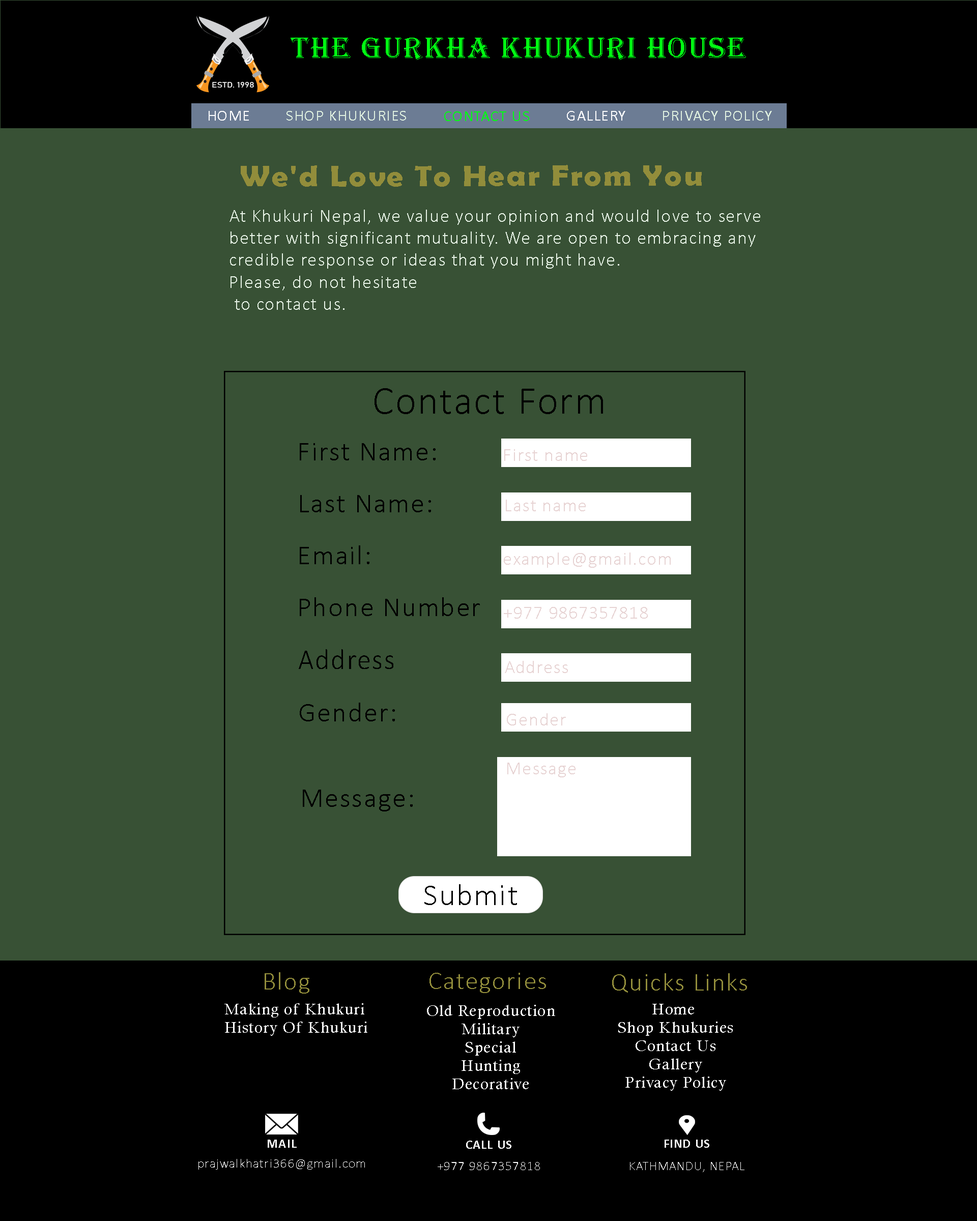
<style>
.page{position:relative;width:977px;height:1221px;background:#385135}
.page>*{position:absolute;margin:0}
.t1{font:30.5px "Algerian";letter-spacing:0.05em;color:#00ff12}
.t2{font:15.3px "Calibri";letter-spacing:0.05em;color:#ffffff}
.t3{font:15.3px "Calibri";letter-spacing:0.05em;color:#deefdf}
.t4{font:15.3px "Calibri";letter-spacing:0.05em;color:#00ff12}
.t5{font:29.3px "BerlinSansFBDemi-Bold";letter-spacing:0.05em;color:#928d3b;scale:1.1 1}
.t6{font:18.3px "Calibri-Light";letter-spacing:0.05em;color:#e7f3e6}
.t7{font:38.9px "Calibri-Light";letter-spacing:0.05em;color:#000000}
.t8{font:27.5px "Calibri-Light";letter-spacing:0.05em;color:#000000}
.t9{font:18.3px "Calibri-Light";letter-spacing:0.05em;color:#e7d3d3}
.t10{font:28.8px "Calibri-Light";letter-spacing:0.05em;color:#000000;scale:0.95 1}
.t11{font:30.5px "Calibri-Light";letter-spacing:0.05em;color:#000000}
.t12{font:25.4px "Calibri-Light";letter-spacing:0.05em;color:#928d3b}
.t13{font:15.3px "CalistoMT";letter-spacing:0.05em;color:#ffffff}
.t14{font:15.3px/60.7px "CalistoMT";letter-spacing:0.05em;color:#ffffff}
.t15{font:12.9px "Calibri-Bold";letter-spacing:0.05em;color:#ffffff}
.t16{font:12.9px "Calibri-Light";letter-spacing:0.05em;color:#ffffff}
</style>
<div class="page">
<p class="t1" style="left:290px;top:38px;width:456px;height:22px">The gurkha khukuri house</p>
<p class="t2" style="left:209px;top:111px;width:40px;height:10px">HOME</p>
<p class="t3" style="left:286px;top:111px;width:120px;height:10px">SHOP KHUKURIES</p>
<p class="t4" style="left:444px;top:111px;width:85px;height:10px">CONTACT US</p>
<p class="t2" style="left:567px;top:111px;width:58px;height:10px">GALLERY</p>
<p class="t3" style="left:663px;top:111px;width:109px;height:10px">PRIVACY POLICY</p>
<p class="t5" style="left:241px;top:165px;width:460px;height:22px">We'd Love To Hear From You</p>
<p class="t6" style="left:229px;top:210px;width:531px;height:100px">At Khukuri Nepal, we value your opinion and would love to serve better with significant mutuality. We are open to embracing any credible response or ideas that you might have.<br>Please, do not hesitate<br> to contact us.</p>
<p class="t7" style="left:374px;top:388px;width:229px;height:26px">Contact Form</p>
<p class="t8" style="left:300px;top:443px;width:135px;height:17px">First Name:</p>
<p class="t9" style="left:504px;top:449px;width:83px;height:12px">First name</p>
<p class="t8" style="left:300px;top:495px;width:131px;height:17px">Last Name:</p>
<p class="t9" style="left:506px;top:500px;width:80px;height:11px">Last name</p>
<p class="t8" style="left:300px;top:545px;width:69px;height:19px">Email:</p>
<p class="t9" style="left:504px;top:552px;width:166px;height:16px">example@gmail.com</p>
<p class="t8" style="left:300px;top:597px;width:180px;height:19px">Phone Number</p>
<p class="t9" style="left:504px;top:607px;width:144px;height:12px">+977 9867357818</p>
<p class="t10" style="left:299px;top:649px;width:94px;height:20px">Address</p>
<p class="t9" style="left:505px;top:661px;width:63px;height:12px">Address</p>
<p class="t8" style="left:300px;top:703px;width:95px;height:18px">Gender:</p>
<p class="t9" style="left:507px;top:713px;width:59px;height:12px">Gender</p>
<p class="t9" style="left:507px;top:763px;width:68px;height:14px">Message</p>
<p class="t8" style="left:303px;top:790px;width:110px;height:21px">Message:</p>
<p class="t11" style="left:424px;top:884px;width:93px;height:21px">Submit</p>
<p class="t12" style="left:265px;top:972px;width:44px;height:21px">Blog</p>
<p class="t12" style="left:429px;top:973px;width:117px;height:20px">Categories</p>
<p class="t12" style="left:612px;top:973px;width:135px;height:19px">Quicks Links</p>
<p class="t13" style="left:224px;top:1003px;width:143px;height:33px"><span class="t14">Making of Khukuri</span><br>History Of Khukuri</p>
<p class="t13" style="left:427px;top:1005px;width:128px;height:84px;text-align:center"><span class="t14">Old Reproduction</span><br>Military<br>Special<br>Hunting<br>Decorative</p>
<p class="t13" style="left:618px;top:1004px;width:115px;height:87px;text-align:center">Home <br>Shop Khukuries<br>Contact Us<br>Gallery<br>Privacy Policy</p>
<p class="t15" style="left:268px;top:1139px;width:29px;height:9px">MAIL</p>
<p class="t15" style="left:466px;top:1141px;width:45px;height:8px">CALL US</p>
<p class="t15" style="left:664px;top:1139px;width:45px;height:9px">FIND US</p>
<p class="t16" style="left:198px;top:1159px;width:167px;height:10px">prajwalkhatri366@gmail.com</p>
<p class="t16" style="left:437px;top:1162px;width:103px;height:8px">+977 9867357818</p>
<p class="t16" style="left:630px;top:1162px;width:114px;height:10px">KATHMANDU, NEPAL</p>
</div>
